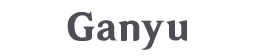
<style>
.page{position:relative;width:256px;height:56px;background:#ffffff}
.page>*{position:absolute;margin:0}
.t1{font:36px "HYWenHei-HEW";color:#4f4e57}
</style>
<div class="page">
<p class="t1" style="left:67px;top:11px;width:120px;height:39px">Ganyu</p>
</div>
